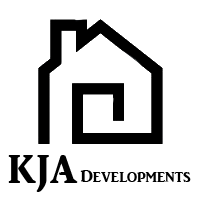
<style>
.page{position:relative;width:200px;height:200px;background:#ffffff}
.page>*{position:absolute;margin:0}
.t1{font:40.7px "ARJULIAN";color:#000000}
.t2{font:18px "ARJULIAN";color:#000000}
</style>
<div class="page">
<p class="t1" style="left:8px;top:155px;width:70px;height:37px">KJA</p>
<p class="t2" style="left:80px;top:170px;width:111px;height:12px">Developments</p>
</div>
